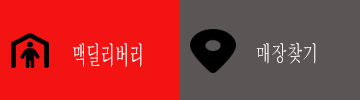
<style>
.page{position:relative;width:360px;height:100px;background:#f31313}
.page>*{position:absolute;margin:0}
.t1{font:25.4px "Batang";color:#ffffff;scale:0.57 1}
.t2{font:21.9px "Batang";color:#ffffff;scale:0.72 1}
</style>
<div class="page">
<p class="t1" style="left:73px;top:43px;width:69px;height:24px">맥딜리버리</p>
<p class="t2" style="left:256px;top:42px;width:60px;height:22px">매장찾기</p>
</div>
